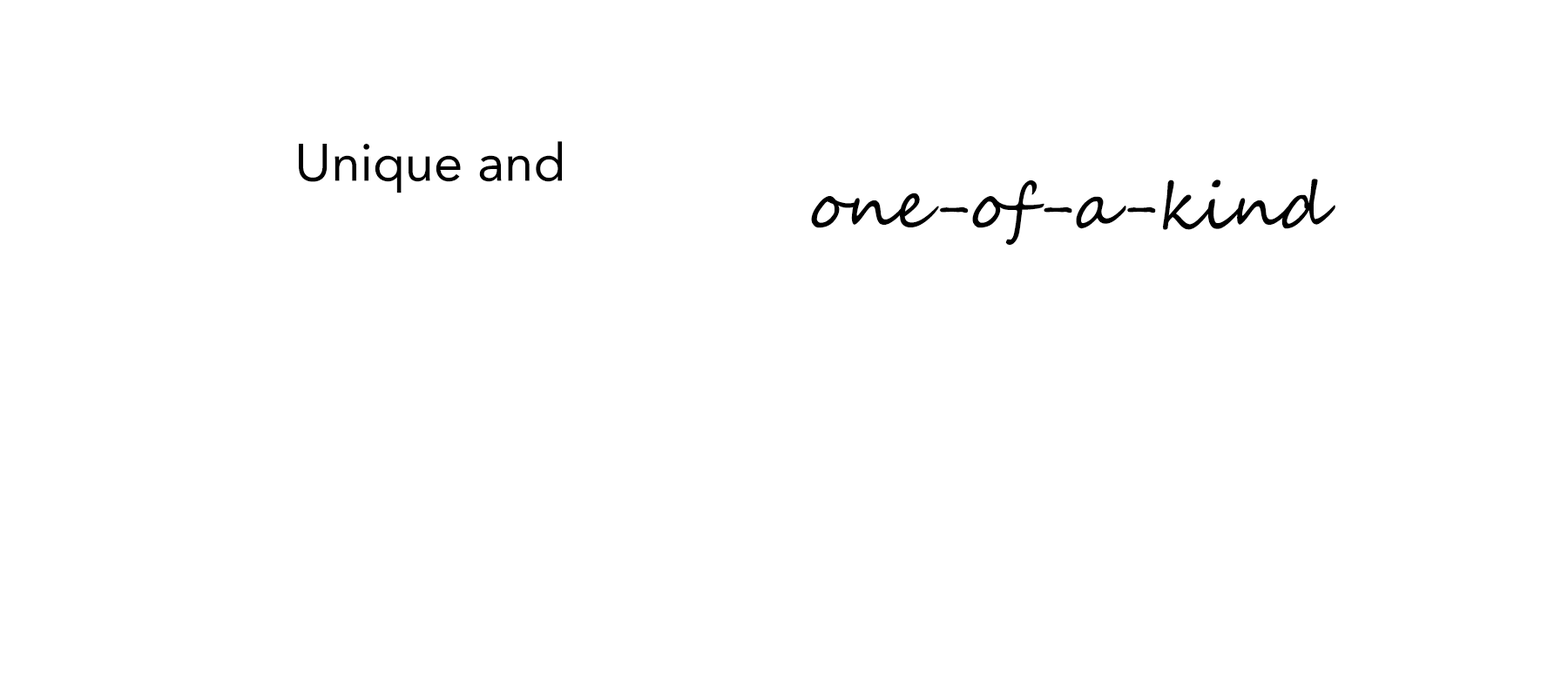
<style>
.page{position:relative;width:1568px;height:697px;background:#ffffff}
.page>*{position:absolute;margin:0}
.t1{font:52.3px "Avenir-Roman";color:#000000}
.t2{font:64.3px "SegoeScript";color:#000000}
</style>
<div class="page">
<p class="t1" style="left:299px;top:141px;width:263px;height:52px">Unique and</p>
<p class="t2" style="left:811px;top:179px;width:524px;height:66px">one-of-a-kind</p>
</div>
